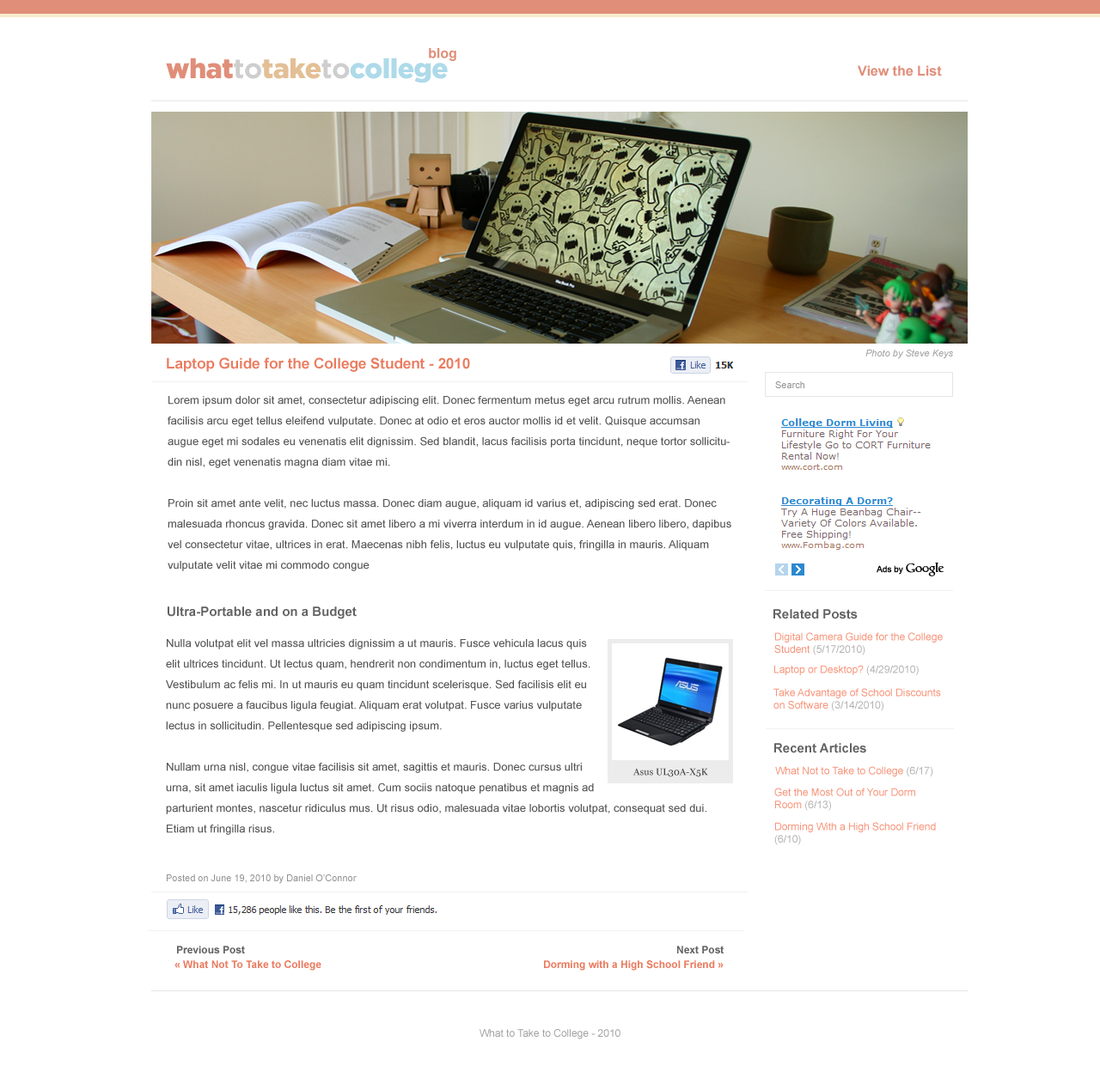
<style>
.page{position:relative;width:1100px;height:1084px;background:#ffffff}
.page>*{position:absolute;margin:0}
.t1{font:13.7px "Arial-BoldMT";color:#e08e79}
.t2{font:27.5px "GothamBlack";letter-spacing:-0.02em;color:#aedae9}
.t3{font:27.5px "GothamBlack";letter-spacing:-0.02em;color:#e08e79}
.t4{font:27.5px "GothamBold";letter-spacing:-0.02em;color:#cecece}
.t5{font:27.5px "GothamBlack";letter-spacing:-0.02em;color:#e3bf95}
.t6{font:9.5px "Arial-ItalicMT";color:#a3a0a0}
.t7{font:14.6px "Arial-BoldMT";color:#ea7c60}
.t8{font:9.5px "ArialMT";color:#919191}
.t9{font:11.2px/20.6px "ArialMT";color:#555454}
.t10{font:12.9px "Arial-BoldMT";color:#626262}
.t11{font:10.3px "ArialMT";color:#f79278}
.t12{font:10.3px "ArialMT";color:#b2b2b2}
.t13{font:9.5px "Georgia";color:#414040}
.t14{font:9.5px "ArialMT";color:#929292}
.t15{font:10.3px "Arial-BoldMT";color:#626262}
.t16{font:10.3px "Arial-BoldMT";color:#ea7c60}
.t17{font:10.3px "ArialMT";color:#a1a1a1}
</style>
<div class="page">
<p class="t1" style="left:429px;top:48px;width:27px;height:13px">blog</p>
<p class="t2" style="left:166px;top:58px;width:282px;height:25px"><span class="t3">what</span><span class="t4">to</span><span class="t5">take</span><span class="t4">to</span>college</p>
<p class="t1" style="left:857px;top:65px;width:85px;height:11px">View the List</p>
<p class="t6" style="left:865px;top:350px;width:88px;height:9px">Photo by Steve Keys</p>
<p class="t7" style="left:167px;top:357px;width:303px;height:15px">Laptop Guide for the College Student - 2010</p>
<p class="t8" style="left:775px;top:381px;width:29px;height:7px">Search</p>
<p class="t9" style="left:168px;top:396px;width:563px;height:175px">Lorem ipsum dolor sit amet, consectetur adipiscing elit. Donec fermentum metus eget arcu rutrum mollis. Aenean facilisis arcu eget tellus eleifend vulputate. Donec at odio et eros auctor mollis id et velit. Quisque accumsan augue eget mi sodales eu venenatis elit dignissim. Sed blandit, lacus facilisis porta tincidunt, neque tortor sollicitudin nisl, eget venenatis magna diam vitae mi. <br><br>Proin sit amet ante velit, nec luctus massa. Donec diam augue, aliquam id varius et, adipiscing sed erat. Donec malesuada rhoncus gravida. Donec sit amet libero a mi viverra interdum in id augue. Aenean libero libero, dapibus vel consectetur vitae, ultrices in erat. Maecenas nibh felis, luctus eu vulputate quis, fringilla in mauris. Aliquam vulputate velit vitae mi commodo congue</p>
<p class="t10" style="left:168px;top:607px;width:189px;height:12px">Ultra-Portable and on a Budget</p>
<p class="t10" style="left:773px;top:609px;width:84px;height:10px">Related Posts</p>
<p class="t9" style="left:166px;top:639px;width:428px;height:155px">Nulla volutpat elit vel massa ultricies dignissim a ut mauris. Fusce vehicula lacus quis elit ultrices tincidunt. Ut lectus quam, hendrerit non condimentum in, luctus eget tellus. Vestibulum ac felis mi. In ut mauris eu quam tincidunt scelerisque. Sed facilisis elit eu nunc posuere a faucibus ligula feugiat. Aliquam erat volutpat. Fusce varius vulputate lectus in sollicitudin. Pellentesque sed adipiscing ipsum. <br><br>Nullam urna nisl, congue vitae facilisis sit amet, sagittis et mauris. Donec cursus ultri urna, sit amet iaculis ligula luctus sit amet. Cum sociis natoque penatibus et magnis ad</p>
<p class="t11" style="left:774px;top:632px;width:169px;height:24px">Digital Camera Guide for the College Student <span class="t12">(5/17/2010)</span></p>
<p class="t11" style="left:774px;top:665px;width:144px;height:10px">Laptop or Desktop? <span class="t12">(4/29/2010)</span></p>
<p class="t11" style="left:773px;top:688px;width:168px;height:23px">Take Advantage of School Discounts on Software <span class="t12">(3/14/2010)</span></p>
<p class="t10" style="left:774px;top:743px;width:92px;height:10px">Recent Articles</p>
<p class="t13" style="left:632px;top:768px;width:76px;height:10px">Asus UL30A-X5K</p>
<p class="t11" style="left:775px;top:766px;width:158px;height:11px">What Not to Take to College <span class="t12">(6/17)</span></p>
<p class="t11" style="left:774px;top:788px;width:141px;height:23px">Get the Most Out of Your Dorm Room <span class="t12">(6/13)</span></p>
<p class="t9" style="left:166px;top:804px;width:540px;height:31px">parturient montes, nascetur ridiculus mus. Ut risus odio, malesuada vitae lobortis volutpat, consequat sed dui. Etiam ut fringilla risus.</p>
<p class="t11" style="left:774px;top:822px;width:162px;height:23px">Dorming With a High School Friend <span class="t12">(6/10)</span></p>
<p class="t14" style="left:167px;top:875px;width:190px;height:9px">Posted on June 19, 2010 by Daniel O’Connor</p>
<p class="t15" style="left:177px;top:946px;width:68px;height:8px">Previous Post</p>
<p class="t15" style="left:677px;top:946px;width:46px;height:8px">Next Post</p>
<p class="t16" style="left:174px;top:961px;width:147px;height:10px">« What Not To Take to College</p>
<p class="t16" style="left:544px;top:961px;width:179px;height:10px">Dorming with a High School Friend »</p>
<p class="t17" style="left:479px;top:1029px;width:141px;height:11px">What to Take to College - 2010</p>
</div>
